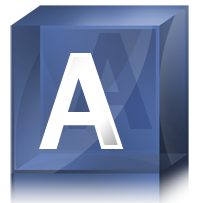
<style>
.page{position:relative;width:200px;height:203px;background:#ffffff}
.page>*{position:absolute;margin:0}
.t1{font:125.4px "CharcoalCY";color:#f8f8f8}
</style>
<div class="page">
<p class="t1" style="left:39px;top:53px;width:85px;height:96px">A</p>
</div>
